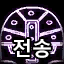
<style>
.page{position:relative;width:64px;height:64px;background:#000000}
.page>*{position:absolute;margin:0}
.t1{font:20px "MalgunGothicBold";color:#ffffff}
</style>
<div class="page">
<p class="t1" style="left:13px;top:39px;width:38px;height:19px">전송</p>
</div>
